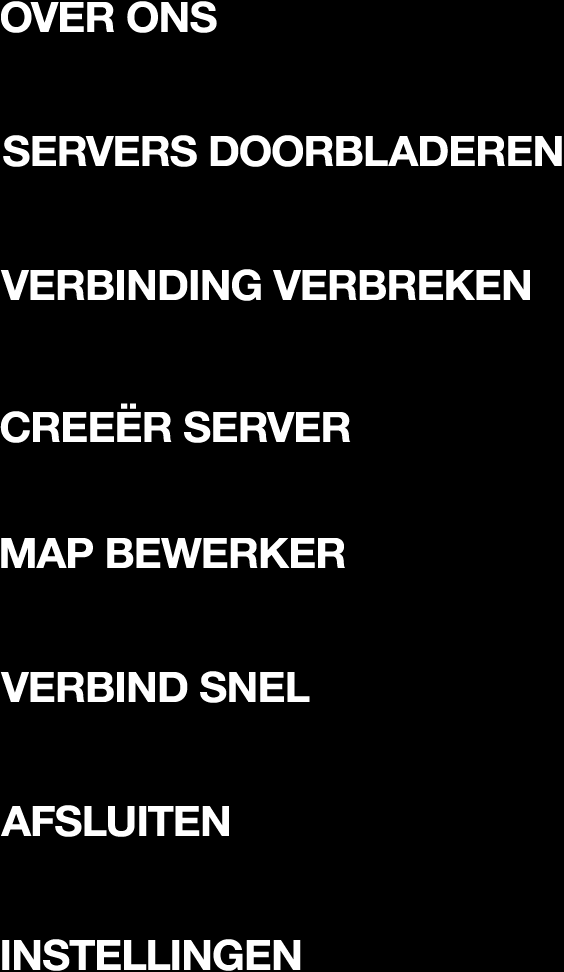
<style>
.page{position:relative;width:564px;height:972px;background:#000000}
.page>*{position:absolute;margin:0}
.t1{font:42px "HelveticaNeueBold";letter-spacing:-0.021em;color:#ffffff;scale:1.03 1}
</style>
<div class="page">
<p class="t1" style="left:1px;top:1px;width:216px;height:32px">OVER ONS</p>
<p class="t1" style="left:3px;top:135px;width:559px;height:32px">SERVERS DOORBLADEREN</p>
<p class="t1" style="left:0px;top:269px;width:530px;height:32px">VERBINDING VERBREKEN</p>
<p class="t1" style="left:0px;top:403px;width:351px;height:40px">CREEËR SERVER</p>
<p class="t1" style="left:1px;top:538px;width:344px;height:30px">MAP BEWERKER</p>
<p class="t1" style="left:0px;top:671px;width:310px;height:32px">VERBIND SNEL</p>
<p class="t1" style="left:1px;top:805px;width:228px;height:32px">AFSLUITEN</p>
<p class="t1" style="left:2px;top:939px;width:299px;height:32px">INSTELLINGEN</p>
</div>
